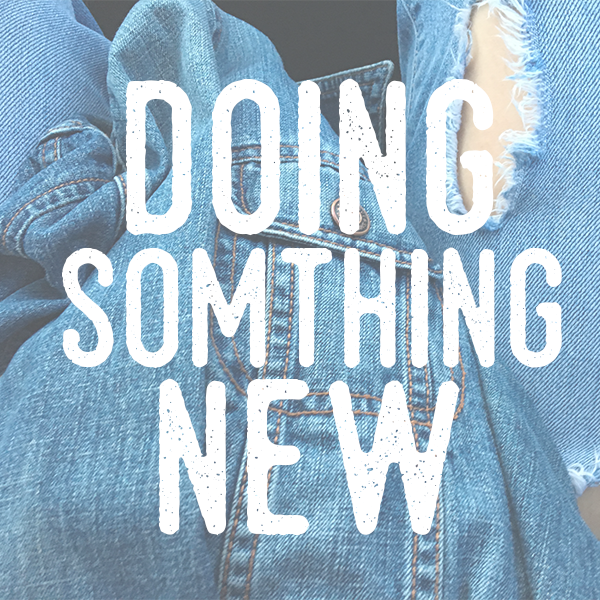
<style>
.page{position:relative;width:600px;height:600px;background:#ffffff}
.page>*{position:absolute;margin:0}
.t1{font:166.7px/133.3px "HamurzFreeVersion";color:#ffffff}
.t2{font:216.7px/133.3px "HamurzFreeVersion";color:#ffffff}
.t3{font:216.7px/166.7px "HamurzFreeVersion";color:#ffffff}
</style>
<div class="page">
<p class="t1" style="left:62px;top:78px;width:500px;height:458px;text-align:center"><span class="t2">doing<br></span>somthing<br><span class="t3">new</span></p>
</div>
